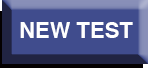
<style>
.page{position:relative;width:148px;height:68px;background:#404c8d}
.page>*{position:absolute;margin:0}
.t1{font:22px "Helvetica-Bold";color:#ffffff}
</style>
<div class="page">
<p class="t1" style="left:20px;top:22px;width:113px;height:16px">NEW TEST</p>
</div>
